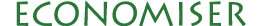
<style>
.page{position:relative;width:257px;height:26px;background:#ffffff}
.page>*{position:absolute;margin:0}
.t1{font:33.5px "LithosPro-Regular";color:#2c7639}
</style>
<div class="page">
<p class="t1" style="left:16px;top:0px;width:230px;height:27px">ECONOMISER</p>
</div>
